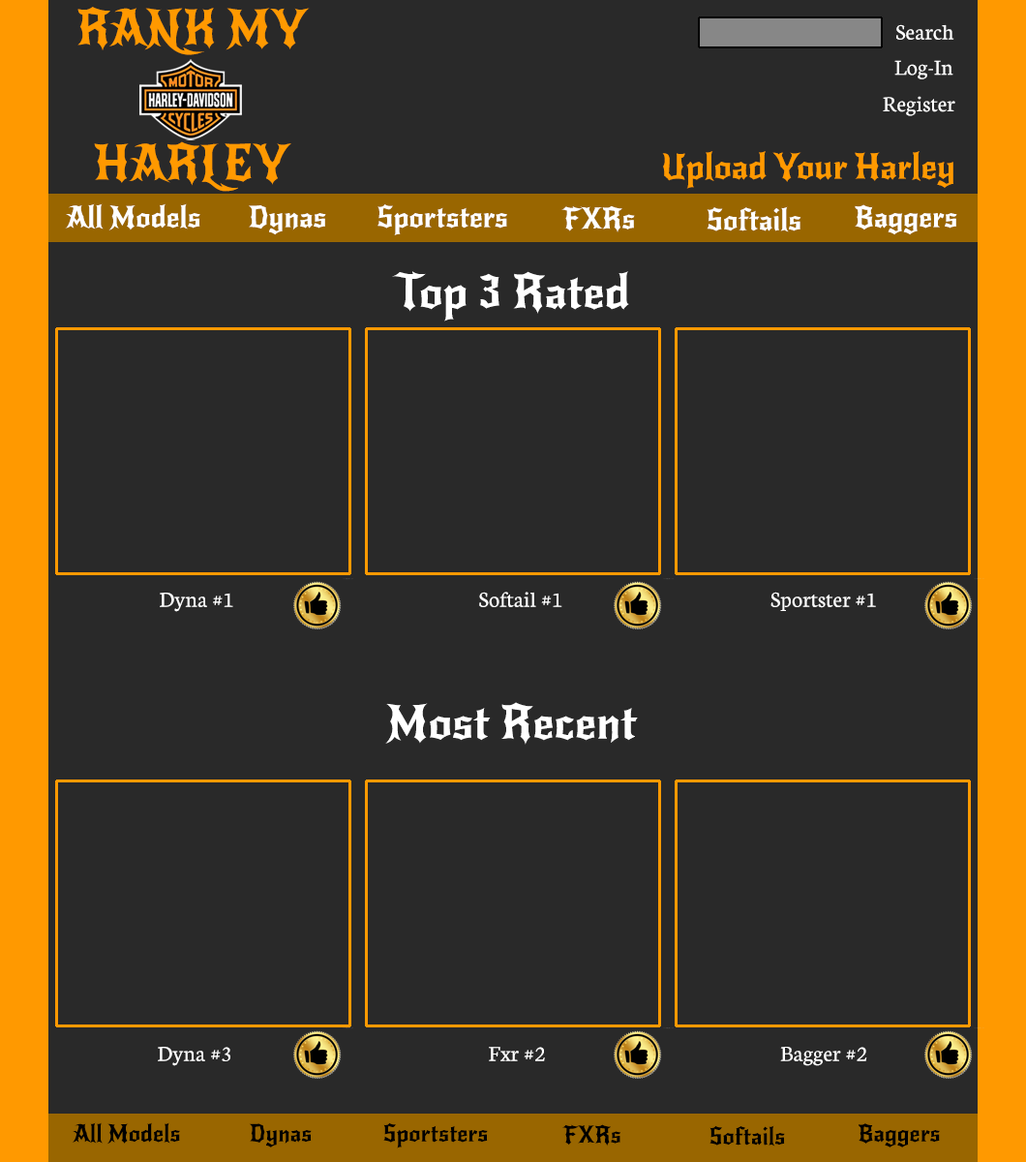
<style>
.page{position:relative;width:1026px;height:1162px;background:#292929}
.page>*{position:absolute;margin:0}
.t1{font:48.4px "NewRocker-Regular";color:#ff9900}
.t2{font:23.2px "Neuton-Regular";color:#ffffff}
.t3{font:34.9px "NewRocker-Regular";color:#ff9900}
.t4{font:29px "NewRocker-Regular";color:#ffffff}
.t5{font:46.5px "NewRocker-Regular";color:#ffffff}
.t6{font:23.2px "NewRocker-Regular";color:#000000}
</style>
<div class="page">
<p class="t1" style="left:77px;top:7px;width:233px;height:48px">RANK MY</p>
<p class="t2" style="left:897px;top:24px;width:58px;height:16px">Search</p>
<p class="t2" style="left:895px;top:60px;width:59px;height:19px">Log-In</p>
<p class="t2" style="left:883px;top:96px;width:73px;height:20px">Register</p>
<p class="t1" style="left:94px;top:141px;width:197px;height:51px">HARLEY</p>
<p class="t3" style="left:662px;top:151px;width:292px;height:38px">Upload Your Harley</p>
<p class="t4" style="left:65px;top:203px;width:135px;height:27px">All Models</p>
<p class="t4" style="left:249px;top:205px;width:77px;height:30px">Dynas</p>
<p class="t4" style="left:378px;top:204px;width:129px;height:31px">Sportsters</p>
<p class="t4" style="left:562px;top:205px;width:73px;height:27px">FXRs</p>
<p class="t4" style="left:707px;top:206px;width:95px;height:26px">Softails</p>
<p class="t4" style="left:855px;top:204px;width:103px;height:31px">Baggers</p>
<p class="t5" style="left:392px;top:271px;width:237px;height:50px">Top 3 Rated</p>
<p class="t2" style="left:160px;top:593px;width:73px;height:19px">Dyna #1</p>
<p class="t2" style="left:479px;top:592px;width:84px;height:15px">Softail #1</p>
<p class="t2" style="left:771px;top:592px;width:105px;height:19px">Sportster #1</p>
<p class="t5" style="left:385px;top:702px;width:253px;height:43px">Most Recent</p>
<p class="t2" style="left:158px;top:1047px;width:72px;height:19px">Dyna #3</p>
<p class="t2" style="left:489px;top:1047px;width:56px;height:14px">Fxr #2</p>
<p class="t2" style="left:780px;top:1047px;width:88px;height:19px">Bagger #2</p>
<p class="t6" style="left:72px;top:1122px;width:108px;height:22px">All Models</p>
<p class="t6" style="left:249px;top:1123px;width:63px;height:24px">Dynas</p>
<p class="t6" style="left:383px;top:1122px;width:105px;height:26px">Sportsters</p>
<p class="t6" style="left:563px;top:1124px;width:58px;height:22px">FXRs</p>
<p class="t6" style="left:710px;top:1125px;width:75px;height:21px">Softails</p>
<p class="t6" style="left:859px;top:1123px;width:81px;height:24px">Baggers</p>
</div>
